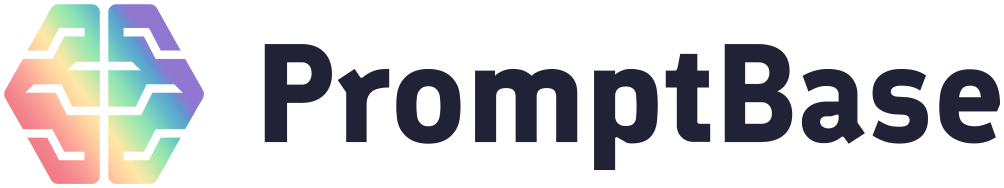
<style>
.page{position:relative;width:1004px;height:188px;background:#ffffff}
.page>*{position:absolute;margin:0}
.t1{font:139.9px "Finlandica-Bold";letter-spacing:-0.005em;color:#222236}
</style>
<div class="page">
<p class="t1" style="left:264px;top:44px;width:736px;height:126px">PromptBase</p>
</div>
